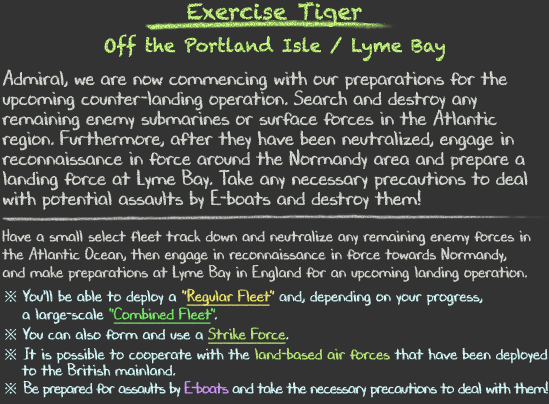
<style>
.page{position:relative;width:549px;height:404px;background:#333333}
.page>*{position:absolute;margin:0}
.t1{font:18px/36px "Chalkduster";color:#bcec77}
.t2{font:22px/36px "Chalkduster";color:#bcec77}
.t3{font:20px/20px "DJBChalkItUp";color:#d9ded6}
.t4{font:16px/18px "DJBChalkItUp";color:#d9ded6}
.t5{font:16px/24px "DJBChalkItUp";color:#d9ded6}
.t6{font:16px/18px "TimesNewRomanPSMT";color:#d7feff}
.t7{font:16px/18px "DJBChalkItUp";color:#d7feff}
.t8{font:16px/18px "DJBChalkItUp";color:#f5ed68}
.t9{font:16px/18px "DJBChalkItUp";color:#f5ed68;text-decoration:underline}
.t10{font:16px/20px "DJBChalkItUp";color:#d7feff}
.t11{font:16px/20px "DJBChalkItUp";color:#7bf26b}
.t12{font:16px/20px "DJBChalkItUp";color:#7bf26b;text-decoration:underline}
.t13{font:16px/20px "TimesNewRomanPSMT";color:#d7feff}
.t14{font:16px/20px "DJBChalkItUp";color:#bdef78;text-decoration:underline}
.t15{font:16px/16px "TimesNewRomanPSMT";color:#d7feff}
.t16{font:16px/16px "DJBChalkItUp";color:#d7feff}
.t17{font:16px/16px "DJBChalkItUp";color:#bdef78}
.t18{font:16px/18px "DJBChalkItUp";letter-spacing:-0.04em;color:#d7feff}
.t19{font:16px/18px "DJBChalkItUp";letter-spacing:-0.04em;color:#d298ff}
</style>
<div class="page">
<p class="t1" style="left:104px;top:2px;width:341px;height:60px;text-align:center"><span class="t2">Exercise Tiger<br></span>Off the Portland Isle / Lyme Bay</p>
<p class="t3" style="left:2px;top:69px;width:547px;height:329px">Admiral, we are now commencing with our preparations for the<br>upcoming counter-landing operation. Search and destroy any<br>remaining enemy submarines or surface forces in the Atlantic<br>region. Furthermore, after they have been neutralized, engage in<br>reconnaissance in force around the Normandy area and prepare a<br>landing force at Lyme Bay. Take any necessary precautions to deal<br>with potential assaults by E-boats and destroy them!<br><br><span class="t4">Have a small select fleet track down and neutralize any remaining enemy forces in<br>the Atlantic Ocean, then engage in reconnaissance in force towards Normandy,<br>and make preparations at Lyme Bay in England for an upcoming landing operation</span><span class="t5">.<br></span><span class="t6">※ </span><span class="t7">You'll be able to deploy a </span><span class="t8">"</span><span class="t9">Regular Fleet</span><span class="t8">"</span><span class="t7"> and, depending on your progress,<br>　 </span><span class="t10">a large-scale </span><span class="t11">"</span><span class="t12">Combined Fleet</span><span class="t11">"</span><span class="t10">.<br></span><span class="t13">※ </span><span class="t10">You can also form and use a </span><span class="t14">Strike Force</span><span class="t10">.<br></span><span class="t15">※</span><span class="t16"> It is possible to cooperate with the </span><span class="t17">land-based air forces</span><span class="t16"> that have been deployed<br>　 to the British mainland.<br></span><span class="t6">※ </span><span class="t18">Be prepared for assaults by </span><span class="t19">E-boats</span><span class="t18"> and take the necessary precautions to deal with them!</span></p>
</div>
